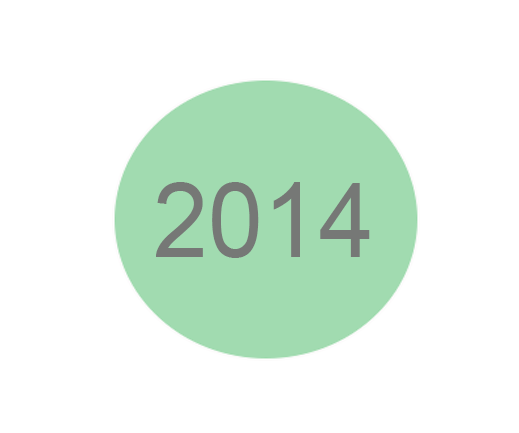
<style>
.page{position:relative;width:519px;height:433px;background:#ffffff}
.page>*{position:absolute;margin:0}
.t1{font:104.8px "ArialMT";color:#767876;scale:0.95 1}
</style>
<div class="page">
<p class="t1" style="left:156px;top:182px;width:214px;height:76px">2014</p>
</div>
